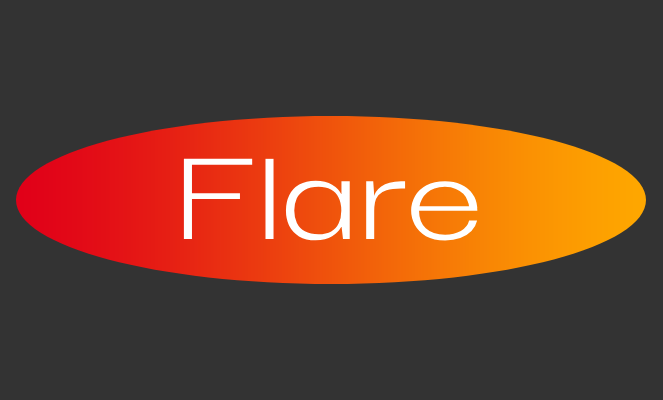
<style>
.page{position:relative;width:663px;height:400px;background:#333333}
.page>*{position:absolute;margin:0}
.t1{font:142.4px "DarkerGrotesqueLight-Regular";color:#ffffff;scale:1.25 1}
</style>
<div class="page">
<p class="t1" style="left:183px;top:158px;width:295px;height:83px">Flare</p>
</div>
